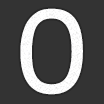
<style>
.page{position:relative;width:104px;height:104px;background:#333333}
.page>*{position:absolute;margin:0}
.t1{font:112px "Arvo";color:#ffffff}
</style>
<div class="page">
<p class="t1" style="left:20px;top:8px;width:63px;height:87px">0</p>
</div>
